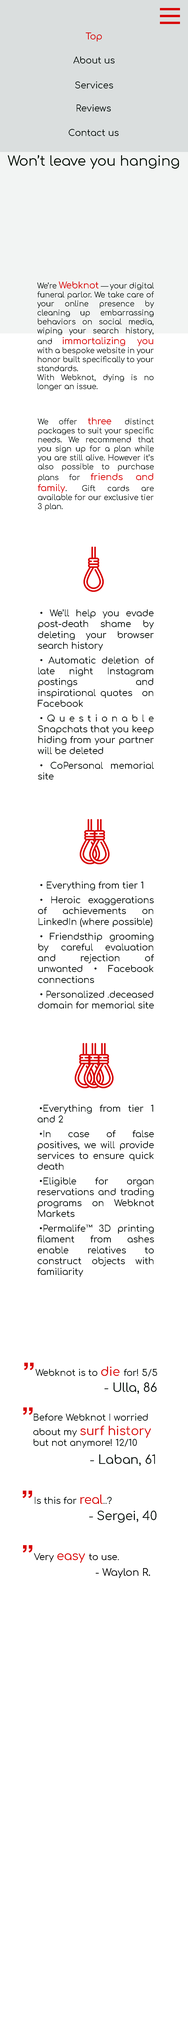
<style>
.page{position:relative;width:188px;height:2024px;background:#ffffff}
.page>*{position:absolute;margin:0}
.t1{font:9px "Comfortaa-Regular";color:#d80303}
.t2{font:9px "Comfortaa-Regular";color:#09110e}
.t3{font:13.7px "Comfortaa-Regular";color:#071108}
.t4{font:7.5px "Comfortaa-Regular";color:#09110e}
.t5{font:25px "Arial-BoldMT";color:#d80303}
.t6{font:12px "Comfortaa-Regular";color:#d80303}
.t7{font:12px "Comfortaa-Regular";color:#09110e}
.t8{font:9px "Comfortaa-Regular";color:#000000}
.t9{font:10px "Comfortaa-Regular";color:#000000}
</style>
<div class="page">
<p class="t1" style="left:86px;top:32px;width:16px;height:10px">Top</p>
<p class="t2" style="left:73px;top:56px;width:41px;height:8px">About us</p>
<p class="t2" style="left:75px;top:82px;width:38px;height:6px">Services</p>
<p class="t2" style="left:76px;top:104px;width:34px;height:8px">Reviews</p>
<p class="t2" style="left:68px;top:129px;width:50px;height:7px">Contact us</p>
<p class="t3" style="left:8px;top:155px;width:170px;height:14px">Won’t leave you hanging</p>
<p class="t4" style="left:37px;top:282px;width:117px;height:109px;text-align:justify">We’re <span class="t1">Webknot </span>— your digital funeral parlor. We take care of your online presence by cleaning up embarrassing behaviors on social media, wiping your search history, and <span class="t1">immortalizing you </span>with a bespoke website in your honor built specifically to your standards. <br>With Webknot, dying is no longer an issue.</p>
<p class="t4" style="left:38px;top:418px;width:115px;height:93px;text-align:justify">We offer <span class="t1">three </span>distinct packages to suit your specific needs. We recommend that you sign up for a plan while you are still alive. However it’s also possible to purchase plans for <span class="t1">friends and family</span><span class="t2">. </span>Gift cards are available for our exclusive tier 3 plan.</p>
<p class="t2" style="left:38px;top:610px;width:116px;height:170px;text-align:justify">• We’ll help you evade post-death shame by deleting your browser search history<br>• Automatic deletion of late night Instagram postings and inspirational quotes  on Facebook<br>•Questionable Snapchats that you keep hiding from your partner will be deleted<br>• CoPersonal memorial site</p>
<p class="t2" style="left:38px;top:882px;width:116px;height:127px;text-align:justify">• Everything from tier 1<br>• Heroic exaggerations of achievements on LinkedIn (where possible)<br>• Friendsthip grooming by careful evaluation and rejection of unwanted • Facebook connections<br>• Personalized .deceased domain for memorial site</p>
<p class="t2" style="left:37px;top:1105px;width:117px;height:172px;text-align:justify">•Everything from tier 1 and 2<br>•In case of false positives, we will provide services to ensure quick death<br>•Eligible for organ reservations and trading programs on Webknot Markets<br>•Permalife™ 3D printing filament from ashes enable relatives to construct objects with familiarity</p>
<p class="t5" style="left:24px;top:1363px;width:10px;height:7px">”</p>
<p class="t2" style="left:36px;top:1367px;width:121px;height:10px">Webknot is to <span class="t6">die </span>for! 5/5</p>
<p class="t7" style="left:104px;top:1383px;width:52px;height:11px">- Ulla, 86</p>
<p class="t5" style="left:23px;top:1408px;width:9px;height:7px">”</p>
<p class="t2" style="left:33px;top:1414px;width:117px;height:34px">Before Webknot I worried <br>about my <span class="t6">surf history <br></span>but not anymore! 12/10</p>
<p class="t7" style="left:90px;top:1455px;width:64px;height:11px">- Laban, 61</p>
<p class="t5" style="left:22px;top:1491px;width:10px;height:7px">”</p>
<p class="t2" style="left:35px;top:1495px;width:76px;height:9px">Is this for <span class="t6">real</span>..?</p>
<p class="t7" style="left:89px;top:1511px;width:67px;height:12px">- Sergei, 40</p>
<p class="t5" style="left:23px;top:1546px;width:9px;height:7px">”</p>
<p class="t8" style="left:34px;top:1554px;width:84px;height:9px">Very <span class="t6">easy </span>to use.</p>
<p class="t9" style="left:96px;top:1568px;width:54px;height:10px">- Waylon R.</p>
</div>
